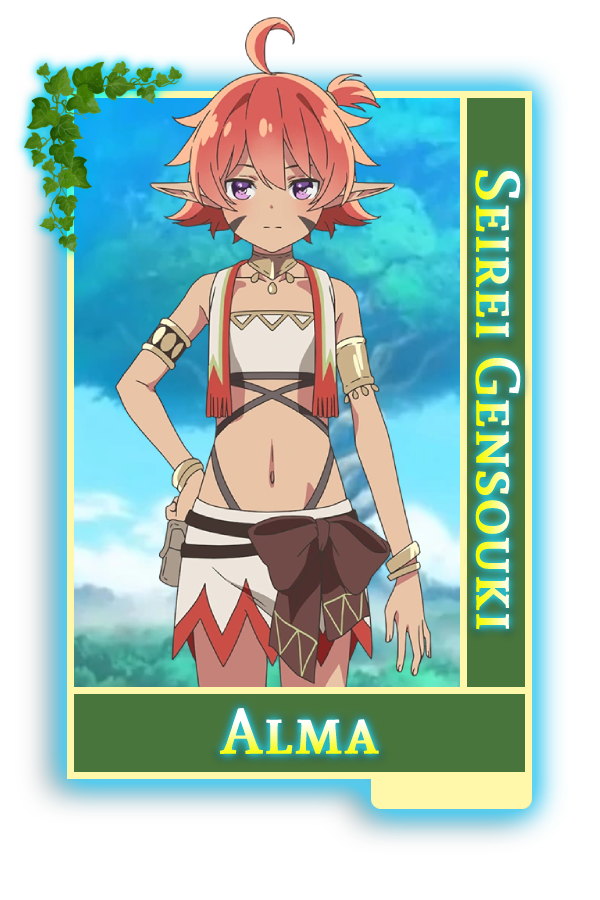
<style>
.page{position:relative;width:600px;height:900px}
.page>*{position:absolute;margin:0}
.t1{font:61px "AndadaSC-Regular";font-weight:bold}
.t2{font:64px "AndadaSC-Regular";font-weight:bold}
</style>
<div class="page">
<p class="t1" style="left:475px;top:170px;width:46px;height:460px;rotate:90deg">Seirei Gensouki</p>
<p class="t2" style="left:219px;top:707px;width:160px;height:48px">Alma</p>
</div>
